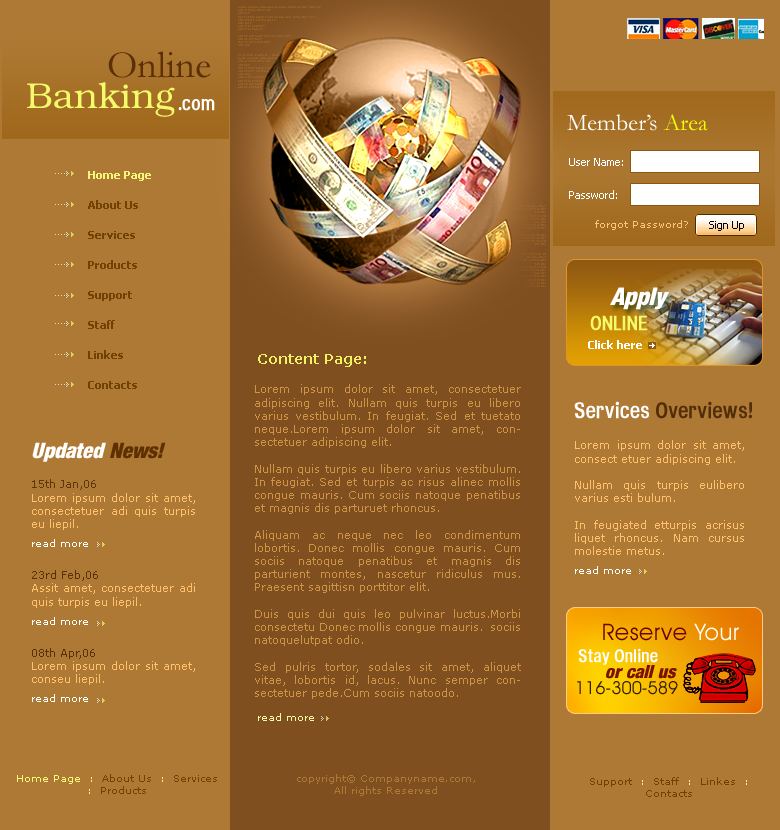
<style>
.page{position:relative;width:780px;height:830px;background:#ad7934}
.page>*{position:absolute;margin:0}
.t1{font:39px "Garamond";color:#5b3006}
.t2{font:36px "Bookman";color:#f3fb6b}
.t3{font:20px "HeadacheNormal";color:#ffffff}
.t4{font:24px "Garamond";color:#ffffff}
.t5{font:24px "Garamond";color:#f1ff05}
.t6{font:11px/33px "Tahoma";color:#ffffff}
.t7{font:11px/30px "Tahoma-Bold";color:#714101}
.t8{font:11px/30px "Tahoma-Bold";color:#f8f979}
.t9{font:10px "Verdana";color:#fdc57a}
.t10{font:24px "HarvestItal";color:#ffffff}
.t11{font:20px "HeadacheNormal";color:#f3fb6b}
.t12{font:11px "Tahoma-Bold";color:#ffffff}
.t13{font:14px "Verdana-Bold";color:#f0f364}
.t14{font:11px "Verdana";color:#ce9446}
.t15{font:22px "HeadacheNormal";color:#522d09}
.t16{font:22px "HeadacheNormal";color:#ffffff}
.t17{font:21px "HarvestItal";color:#ffffff}
.t18{font:21px "HarvestItal";color:#5e2f00}
.t19{font:11px "Verdana";color:#ffc16e}
.t20{font:10px/19px "Verdana";color:#ffffff}
.t21{font:11px "Verdana";color:#603509}
.t22{font:11px "Verdana";color:#5b3006}
.t23{font:23px "AvantGardeITCbyBT-Book";letter-spacing:0.03em;color:#690301}
.t24{font:23px "AvantGardeITCbyBT-Book";letter-spacing:0.03em;color:#ffffff}
.t25{font:18px "HeadacheNormal";color:#ffffff}
.t26{font:18px "HarvestItal";color:#7b1201}
.t27{font:18px "AvantGardeITCbyBT-Book";color:#341a00}
.t28{font:10px "Verdana";color:#faf8a2}
.t29{font:10px "Verdana";color:#ad7934}
.t30{font:10px "Verdana";color:#714101}
.t31{font:10px "Verdana";color:#f8f979}
</style>
<div class="page">
<p class="t1" style="left:108px;top:51px;width:103px;height:27px">Online</p>
<p class="t2" style="left:27px;top:82px;width:148px;height:35px">Banking</p>
<p class="t3" style="left:178px;top:99px;width:37px;height:12px">.com</p>
<p class="t4" style="left:567px;top:114px;width:141px;height:17px">Member’s <span class="t5">Area</span></p>
<p class="t6" style="left:569px;top:158px;width:54px;height:41px">User Name:<br>Password:</p>
<p class="t7" style="left:88px;top:171px;width:63px;height:218px;text-align:justify"><span class="t8">Home Page<br></span>About Us<br>Services<br>Products<br>Support<br>Staff <br>Linkes<br>Contacts</p>
<p class="t9" style="left:595px;top:220px;width:93px;height:10px">forgot Password?</p>
<p class="t10" style="left:610px;top:287px;width:59px;height:23px">Apply</p>
<p class="t11" style="left:590px;top:315px;width:58px;height:16px">ONLINE</p>
<p class="t12" style="left:588px;top:340px;width:54px;height:9px">Click here</p>
<p class="t13" style="left:258px;top:354px;width:108px;height:13px">Content Page:</p>
<p class="t14" style="left:255px;top:384px;width:266px;height:315px;text-align:justify">Lorem ipsum dolor sit amet, consectetuer adipiscing elit. Nullam quis turpis eu libero varius vestibulum. In feugiat. Sed et tuetato neque.Lorem ipsum dolor sit amet, consectetuer adipiscing elit. <br><br>Nullam quis turpis eu libero varius vestibulum. In feugiat. Sed et turpis ac risus alinec mollis congue mauris. Cum sociis natoque penatibus et magnis dis parturuet rhoncus. <br><br>Aliquam ac neque nec leo condimentum lobortis. Donec mollis congue mauris. Cum sociis natoque penatibus et magnis dis parturient montes, nascetur ridiculus mus. Praesent sagittisn porttitor elit.<br><br>Duis quis dui quis leo pulvinar luctus.Morbi consectetu Donec mollis congue mauris.  sociis natoquelutpat odio. <br><br>Sed pulris tortor, sodales sit amet, aliquet vitae, lobortis id, lacus. Nunc semper consectetuer pede.Cum sociis natoodo.</p>
<p class="t15" style="left:574px;top:401px;width:178px;height:18px"><span class="t16">Services </span>Overviews!</p>
<p class="t17" style="left:32px;top:442px;width:134px;height:20px">Updated <span class="t18">News!</span></p>
<p class="t19" style="left:575px;top:440px;width:169px;height:134px;text-align:justify">Lorem ipsum dolor sit amet, consect etuer adipiscing elit.<br><br>Nullam quis turpis eulibero varius esti bulum.<br><br>In feugiated etturpis acrisus liquet rhoncus. Nam cursus molestie metus.<br><span class="t20">read more</span></p>
<p class="t19" style="left:32px;top:479px;width:163px;height:223px;text-align:justify"><span class="t21">15th Jan,06<br></span>Lorem ipsum dolor sit amet, consectetuer adi quis turpis eu liepil.<br><span class="t20">read more<br><br></span><span class="t22">23rd Feb,06<br></span>Assit amet, consectetuer adi quis turpis eu liepil.<br><span class="t20">read more<br><br></span><span class="t22">08th Apr,06<br></span>Lorem ipsum dolor sit amet, conseu liepil.<br><span class="t20">read more</span></p>
<p class="t23" style="left:603px;top:623px;width:136px;height:18px">Reserve <span class="t24">Your</span></p>
<p class="t25" style="left:578px;top:648px;width:80px;height:17px">Stay Online</p>
<p class="t26" style="left:606px;top:665px;width:71px;height:14px">or call us</p>
<p class="t27" style="left:577px;top:681px;width:101px;height:14px">116-300-589</p>
<p class="t28" style="left:258px;top:713px;width:56px;height:8px">read more</p>
<p class="t29" style="left:297px;top:774px;width:178px;height:22px;text-align:center">copyright© Companyname.com,<br>All rights Reserved</p>
<p class="t30" style="left:590px;top:777px;width:157px;height:20px;text-align:center">Support<span class="t31">  :  </span>Staff<span class="t31">  :  </span>Linkes<span class="t31">  :  </span>Contacts</p>
</div>
